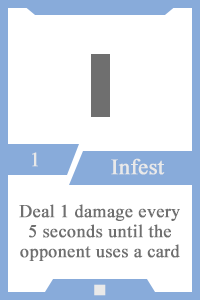
<style>
.page{position:relative;width:200px;height:300px;background:#ffffff}
.page>*{position:absolute;margin:0}
.t1{font:20px "TimesNewRomanPSMT";color:#e9e9e9;font-weight:bold}
.t2{font:22px "TimesNewRomanPSMT";color:#e9e9e9;font-weight:bold}
.t3{font:18px/20px "TimesNewRomanPSMT";color:#6f6f6f;font-weight:bold}
.t4{font:14px "AdobeHeitiStd-Regular";color:#e9e9e9;font-weight:bold}
</style>
<div class="page">
<p class="t1" style="left:32px;top:152px;width:6px;height:15px">1</p>
<p class="t2" style="left:111px;top:158px;width:54px;height:17px">Infest</p>
<p class="t3" style="left:19px;top:204px;width:161px;height:57px;text-align:center">Deal 1 damage every<br>5 seconds until the opponent uses a card</p>
<p class="t4" style="left:94px;top:284px;width:12px;height:12px">■</p>
</div>
